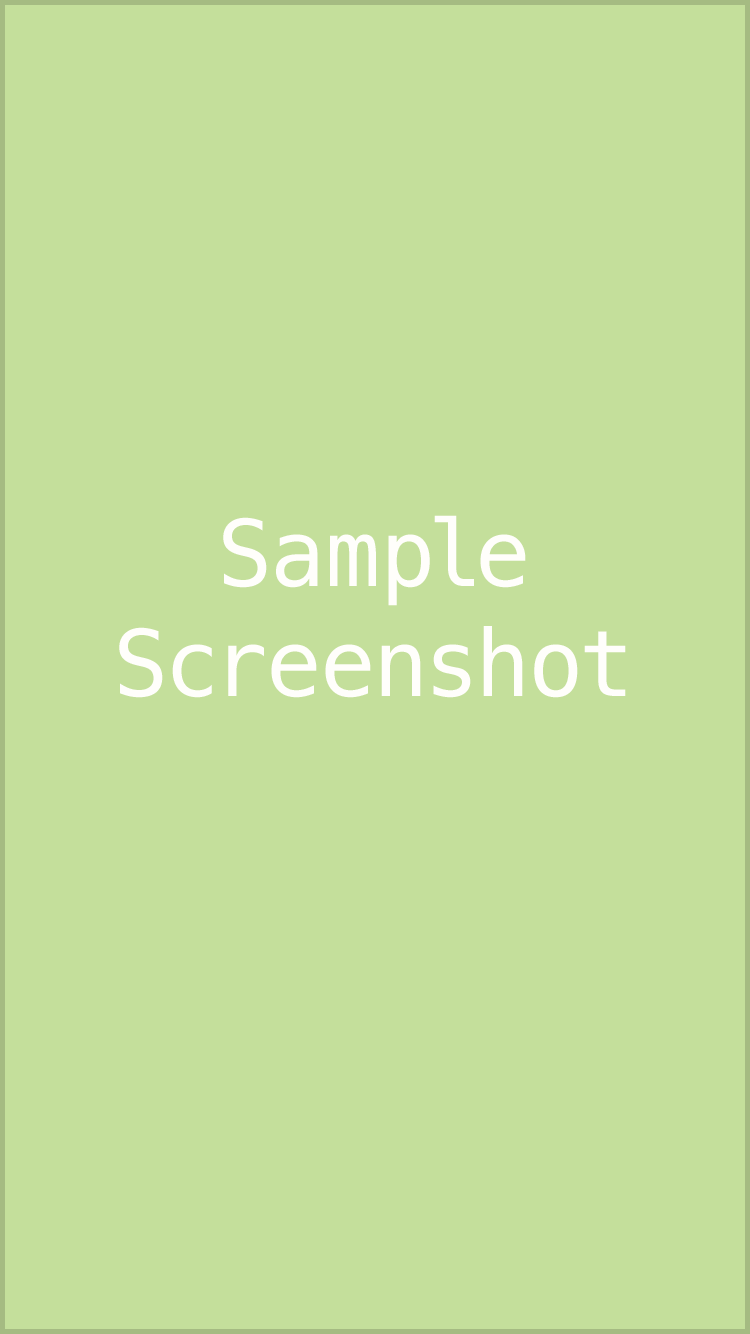
<style>
.page{position:relative;width:750px;height:1334px;background:#c4df9b}
.page>*{position:absolute;margin:0}
.t1{font:92px "Menlo-Regular";color:#fffefb}
</style>
<div class="page">
<p class="t1" style="left:119px;top:515px;width:507px;height:183px;text-align:center">Sample<br>Screenshot</p>
</div>
